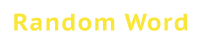
<style>
.page{position:relative;width:200px;height:50px;background:#ffffff}
.page>*{position:absolute;margin:0}
.t1{font:24px "PTSans-CaptionBold";letter-spacing:0.05em;color:#fae639}
</style>
<div class="page">
<p class="t1" style="left:14px;top:13px;width:174px;height:18px">Random Word</p>
</div>
